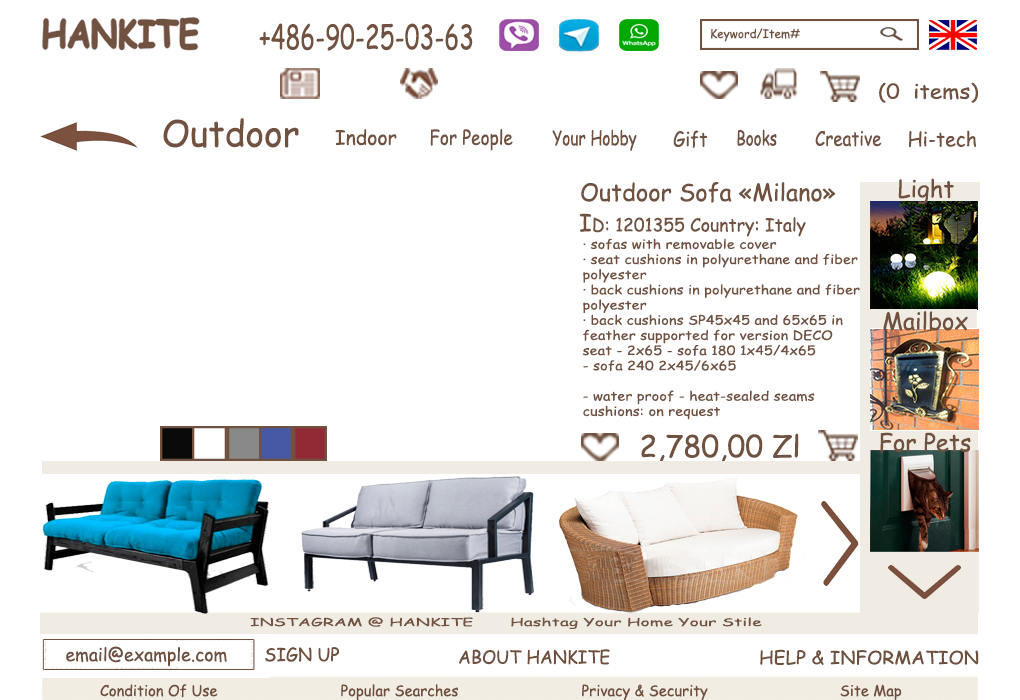
<style>
.page{position:relative;width:1020px;height:700px;background:#ffffff}
.page>*{position:absolute;margin:0}
.t1{font:33.4px "ComicSansMS";color:#715241;scale:0.73 1}
.t2{font:12px "ComicSansMS";color:#715241}
.t3{font:20px "ComicSansMS";color:#715241;scale:1.12 1}
.t4{font:36px "ComicSansMS";color:#715241}
.t5{font:20px "ComicSansMS";color:#715241}
.t6{font:20px "ComicSansMS";color:#715241;scale:0.86 1}
.t7{font:20px "ComicSansMS";color:#715241;scale:0.77 1}
.t8{font:20px "ComicSansMS";color:#715242;scale:0.89 1}
.t9{font:20px "ComicSansMS";color:#715242;scale:0.75 1}
.t10{font:20px "ComicSansMS";color:#715241;scale:0.85 1}
.t11{font:20px "ComicSansMS";color:#715242}
.t12{font:24px "ComicSansMS";color:#715241}
.t13{font:24px "ComicSansMS";color:#70513f}
.t14{font:18px "ComicSansMS";color:#715241}
.t15{font:12.7px "ComicSansMS";color:#715241;scale:1.16 1}
.t16{font:30px "ComicSansMS";color:#715241}
.t17{font:10.8px "ComicSansMS";color:#715241;scale:1.63 1}
.t18{font:18px "ComicSansMS";color:#6f503e}
.t19{font:18px "ComicSansMS";color:#6f503e;scale:1.06 1}
.t20{font:15px "ComicSansMS";color:#6f503e}
</style>
<div class="page">
<p class="t1" style="left:259px;top:23px;width:214px;height:28px">+486-90-25-03-63</p>
<p class="t2" style="left:711px;top:28px;width:89px;height:14px">Keyword/Item#</p>
<p class="t3" style="left:879px;top:82px;width:99px;height:21px">(0  items)</p>
<p class="t4" style="left:163px;top:118px;width:136px;height:30px">Outdoor</p>
<p class="t5" style="left:335px;top:129px;width:62px;height:17px">Indoor</p>
<p class="t6" style="left:430px;top:128px;width:83px;height:23px">For People</p>
<p class="t7" style="left:552px;top:129px;width:85px;height:22px">Your Hobby</p>
<p class="t8" style="left:673px;top:130px;width:35px;height:18px">Gift</p>
<p class="t9" style="left:737px;top:129px;width:40px;height:17px">Books</p>
<p class="t10" style="left:815px;top:130px;width:67px;height:17px">Creative</p>
<p class="t11" style="left:909px;top:130px;width:68px;height:18px">Hi-tech</p>
<p class="t12" style="left:581px;top:182px;width:255px;height:21px">Outdoor Sofa «Milano»</p>
<p class="t13" style="left:898px;top:178px;width:56px;height:26px">Light</p>
<p class="t14" style="left:579px;top:213px;width:227px;height:24px"><span class="t12">I</span>D: 1201355 Country: Italy</p>
<p class="t15" style="left:582px;top:238px;width:278px;height:182px">· sofas with removable cover<br>· seat cushions in polyurethane and fiber<br>polyester<br>· back cushions in polyurethane and fiber<br>polyester<br>· back cushions SP45x45 and 65x65 in<br>feather supported for version DECO<br>seat - 2x65 - sofa 180 1x45/4x65<br>- sofa 240 2x45/6x65<br><br>- water proof - heat-sealed seams<br>cushions: on request</p>
<p class="t13" style="left:883px;top:310px;width:85px;height:21px">Mailbox</p>
<p class="t16" style="left:641px;top:433px;width:158px;height:30px">2,780,00 Zl</p>
<p class="t13" style="left:880px;top:432px;width:91px;height:21px">For Pets</p>
<p class="t17" style="left:250px;top:617px;width:512px;height:12px">INSTAGRAM @ HANKITE       Hashtag Your Home Your Stile</p>
<p class="t18" style="left:66px;top:646px;width:274px;height:21px">email@example.com       SIGN UP</p>
<p class="t18" style="left:459px;top:649px;width:151px;height:16px">ABOUT HANKITE</p>
<p class="t19" style="left:760px;top:649px;width:219px;height:16px">HELP &amp; INFORMATION</p>
<p class="t20" style="left:100px;top:684px;width:802px;height:17px">Condition Of Use                            Popular Searches                            Privacy &amp; Security                              Site Map</p>
</div>
